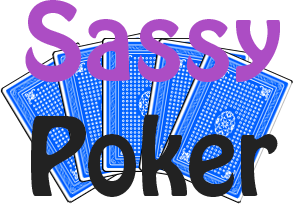
<style>
.page{position:relative;width:293px;height:204px;background:#ffffff}
.page>*{position:absolute;margin:0}
.t1{font:96px "HoboStd";color:#ac4dc4}
.t2{font:96px "HoboStd";color:#222222}
</style>
<div class="page">
<p class="t1" style="left:25px;top:0px;width:255px;height:197px;text-align:center">Sassy<br><span class="t2">Poker</span></p>
</div>
